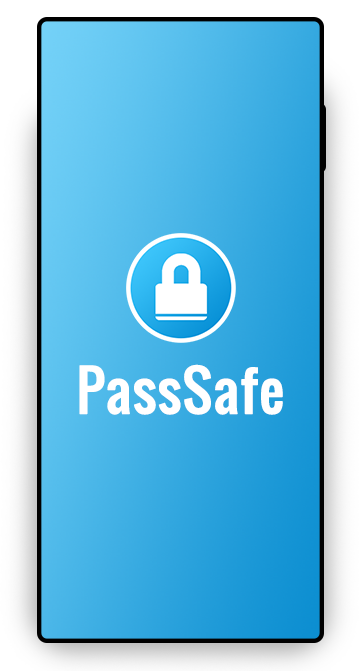
<style>
.page{position:relative;width:359px;height:671px}
.page>*{position:absolute;margin:0}
.t1{font:54.5px "Oswald-Regular";color:#ffffff;font-weight:bold}
</style>
<div class="page">
<p class="t1" style="left:79px;top:364px;width:204px;height:51px">PassSafe</p>
</div>
